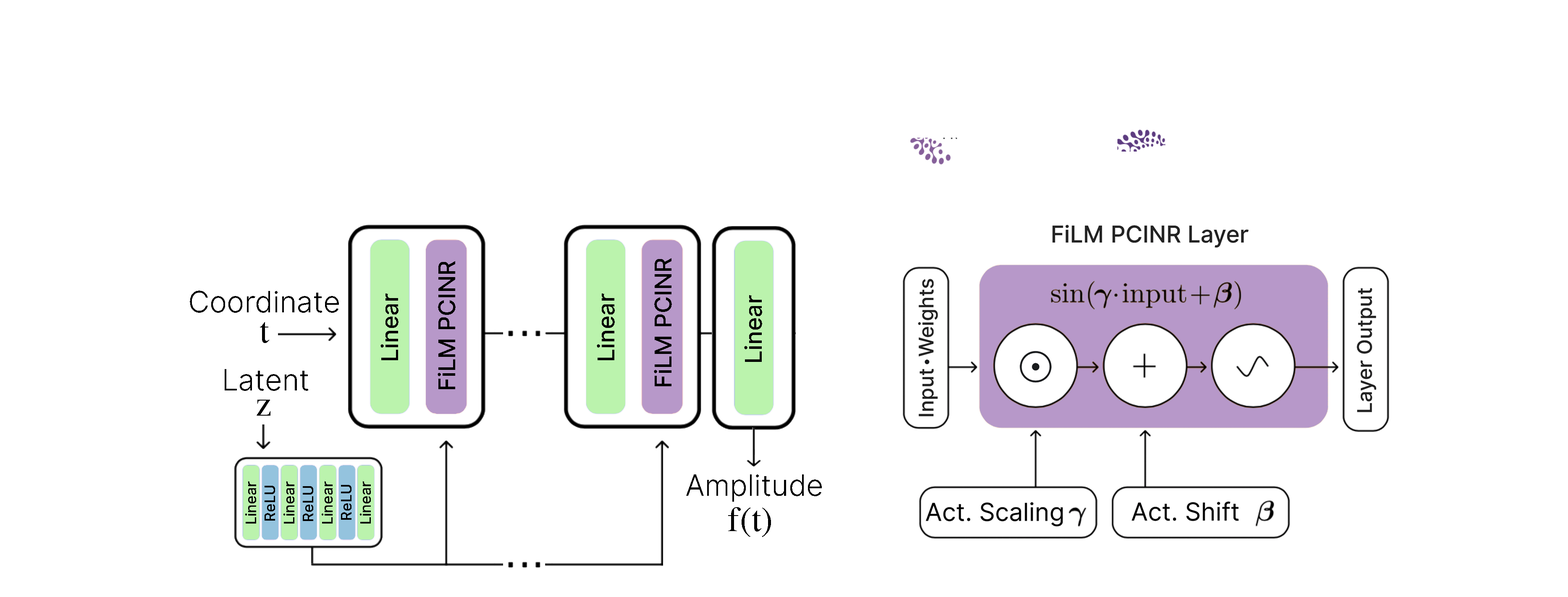
<style>
.page{position:relative;width:1568px;height:597px;background:#ffffff}
.page>*{position:absolute;margin:0}
.t1{font:39.9px "InterUI-Medium";color:#000000}
.t2{font:50.4px "InterUI-Light";color:#000000}
.t3{font:60.5px "Times-Roman";color:#000000}
.t4{font:25.4px "InterUI-Medium";color:#000000}
</style>
<div class="page">
<p class="t1" style="left:438px;top:261px;width:18px;height:128px;rotate:-90deg">FiLM PCINR</p>
<p class="t1" style="left:654px;top:258px;width:18px;height:128px;rotate:-90deg">FiLM PCINR</p>
<p class="t2" style="left:190px;top:291px;width:149px;height:22px">Coordinate</p>
<p class="t1" style="left:380px;top:294px;width:19px;height:66px;rotate:-90deg">Linear</p>
<p class="t1" style="left:597px;top:294px;width:18px;height:66px;rotate:-90deg">Linear</p>
<p class="t1" style="left:744px;top:295px;width:18px;height:67px;rotate:-90deg">Linear</p>
<p class="t3" style="left:260px;top:322px;width:9px;height:21px">t</p>
<p class="t2" style="left:225px;top:369px;width:83px;height:22px">Latent</p>
<p class="t3" style="left:257px;top:400px;width:13px;height:16px">z</p>
<p class="t4" style="left:245px;top:481px;width:11px;height:43px;rotate:-90deg">Linear</p>
<p class="t4" style="left:265px;top:486px;width:10px;height:35px;rotate:-90deg">ReLU</p>
<p class="t4" style="left:283px;top:481px;width:11px;height:43px;rotate:-90deg">Linear</p>
<p class="t4" style="left:322px;top:481px;width:11px;height:43px;rotate:-90deg">Linear</p>
<p class="t4" style="left:341px;top:485px;width:10px;height:35px;rotate:-90deg">ReLU</p>
<p class="t4" style="left:360px;top:481px;width:11px;height:43px;rotate:-90deg">Linear</p>
<p class="t2" style="left:686px;top:475px;width:136px;height:27px">Amplitude</p>
<p class="t4" style="left:303px;top:486px;width:10px;height:35px;rotate:-90deg">ReLU</p>
<p class="t3" style="left:728px;top:507px;width:43px;height:30px">f(t)</p>
</div>
